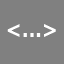
<style>
.page{position:relative;width:64px;height:64px;background:#808080}
.page>*{position:absolute;margin:0}
.t1{font:19.5px "Verdana-Bold";color:#ffffff;scale:0.95 1}
</style>
<div class="page">
<p class="t1" style="left:7px;top:24px;width:49px;height:13px">&lt;...&gt;</p>
</div>
